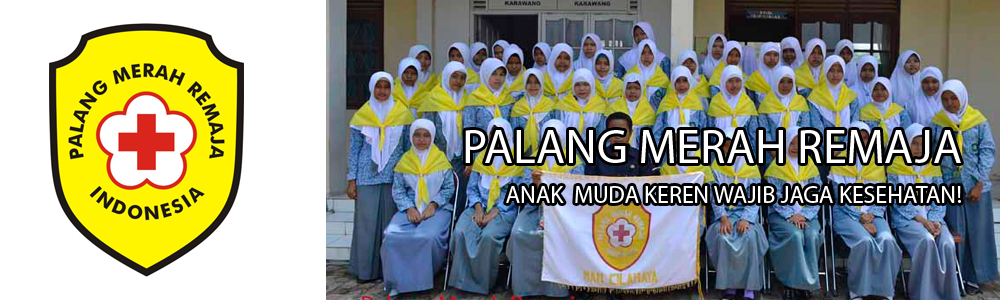
<style>
.page{position:relative;width:1000px;height:300px;background:#ffffff}
.page>*{position:absolute;margin:0}
.t1{font:48px "MyriadPro-Regular";color:#ffffff}
.t2{font:24px "MyriadPro-Regular";color:#ffffff}
</style>
<div class="page">
<p class="t1" style="left:465px;top:130px;width:496px;height:33px">PALANG MERAH REMAJA</p>
<p class="t2" style="left:506px;top:186px;width:455px;height:17px">ANAK  MUDA KEREN WAJIB JAGA KESEHATAN!</p>
</div>
